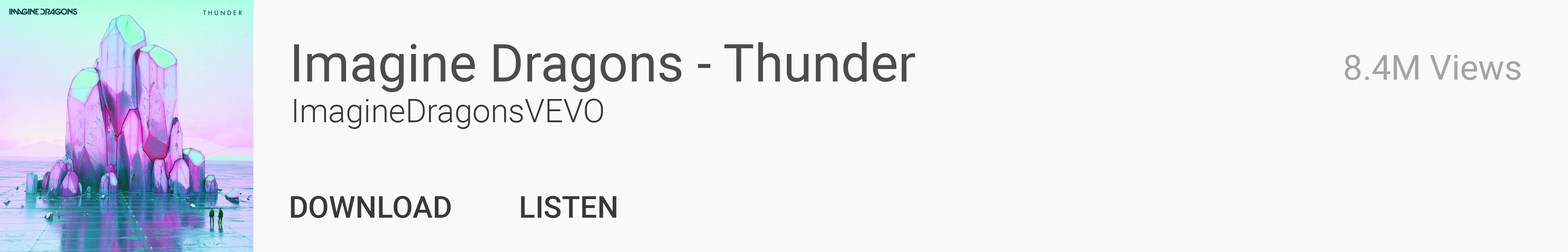
<style>
.page{position:relative;width:1568px;height:252px;background:#f9f9f9}
.page>*{position:absolute;margin:0}
.t1{font:52.3px "Roboto-Regular";color:#4c4c4c}
.t2{font:34.6px "Roboto-Regular";color:#a3a3a3}
.t3{font:32.4px "Roboto-Light";color:#383838}
.t4{font:30px "Roboto-Medium";color:#383838}
</style>
<div class="page">
<p class="t1" style="left:294px;top:42px;width:621px;height:50px">Imagine Dragons - Thunder</p>
<p class="t2" style="left:1345px;top:55px;width:176px;height:25px">8.4M Views</p>
<p class="t3" style="left:294px;top:99px;width:309px;height:30px">ImagineDragonsVEVO</p>
<p class="t4" style="left:291px;top:196px;width:326px;height:22px">DOWNLOAD     LISTEN</p>
</div>
